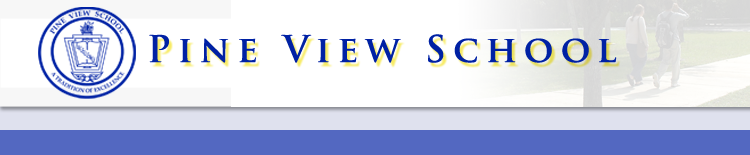
<style>
.page{position:relative;width:750px;height:155px;background:#ffffff}
.page>*{position:absolute;margin:0}
.t1{font:36px "TrajanPro-Bold";letter-spacing:0.2em;color:#0021a4}
</style>
<div class="page">
<p class="t1" style="left:149px;top:34px;width:468px;height:29px">Pine View School</p>
</div>
